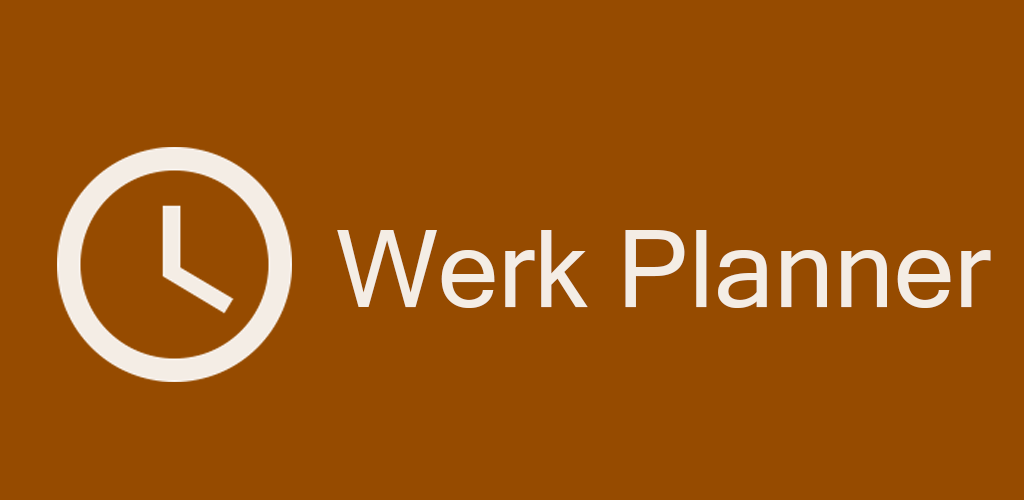
<style>
.page{position:relative;width:1024px;height:500px;background:#964b00}
.page>*{position:absolute;margin:0}
.t1{font:108px "MicrosoftSansSerif";color:#f4ede5}
</style>
<div class="page">
<p class="t1" style="left:337px;top:230px;width:654px;height:78px">Werk Planner</p>
</div>
